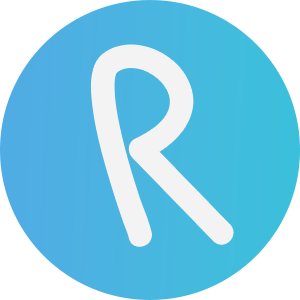
<style>
.page{position:relative;width:300px;height:300px;background:#ffffff}
.page>*{position:absolute;margin:0}
.t1{font:270.8px "LoveislandSCAN4Regular";color:#f3f3f3}
</style>
<div class="page">
<p class="t1" style="left:93px;top:47px;width:138px;height:197px">R</p>
</div>
